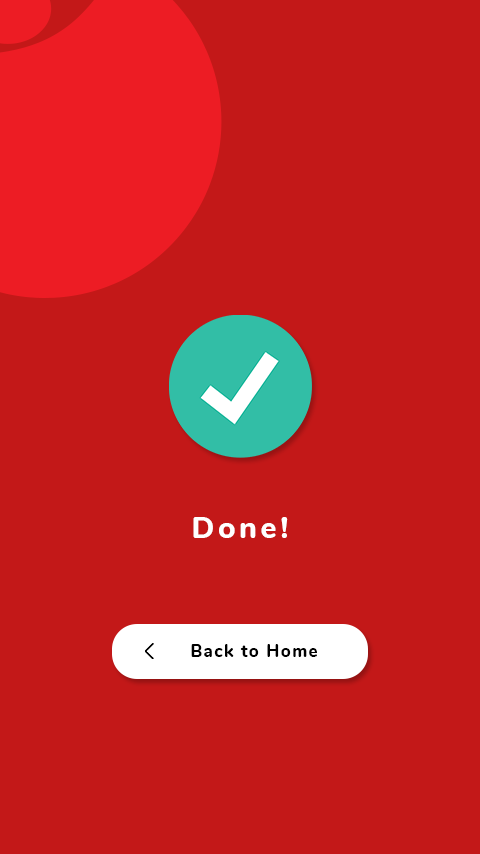
<style>
.page{position:relative;width:480px;height:854px;background:#c31818}
.page>*{position:absolute;margin:0}
.t1{font:30px "Nunito-ExtraBold";letter-spacing:0.12em;color:#ffffff}
.t2{font:17px "Nunito-ExtraBold";letter-spacing:0.08em;color:#000000}
</style>
<div class="page">
<p class="t1" style="left:193px;top:517px;width:95px;height:21px">Done!</p>
<p class="t2" style="left:191px;top:644px;width:126px;height:13px">Back to Home</p>
</div>
